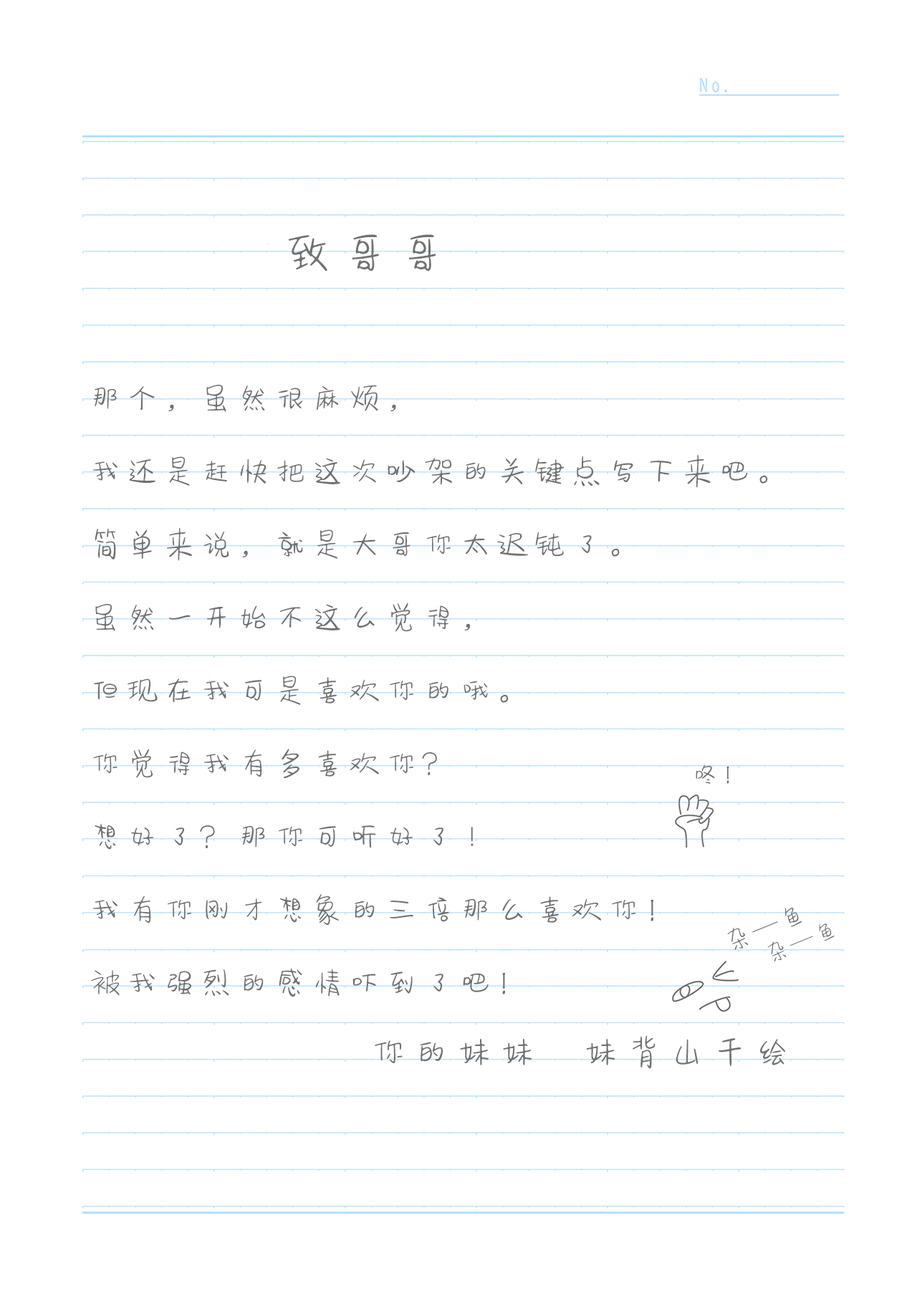
<style>
.page{position:relative;width:917px;height:1301px;background:#ffffff}
.page>*{position:absolute;margin:0}
.t1{font:52.3px "FZSEYBJW--GB1-0";letter-spacing:0.09em;color:#717171}
.t2{font:34px/73.1px "FZSEYBJW--GB1-0";letter-spacing:0.09em;color:#717171}
.t3{font:27.1px "FZSEYBJW--GB1-0";letter-spacing:0.09em;color:#717171}
.t4{font:24.2px "FZSEYBJW--GB1-0";letter-spacing:0.09em;color:#717171}
.t5{font:39.4px "FZSEYBJW--GB1-0";letter-spacing:0.09em;color:#717171}
</style>
<div class="page">
<p class="t1" style="left:289px;top:234px;width:147px;height:37px">致哥哥</p>
<p class="t2" style="left:91px;top:385px;width:677px;height:612px">那个，虽然很麻烦，<br>我还是赶快把这次吵架的关键点写下来吧。<br>简单来说，就是大哥你太迟钝了。<br>虽然一开始不这么觉得，<br>但现在我可是喜欢你的哦。<br>你觉得我有多喜欢你？<br>想好了？那你可听好了!<br>我有你刚才想象的三倍那么喜欢你！<br>被我强烈的感情吓到了吧！</p>
<p class="t3" style="left:695px;top:764px;width:34px;height:20px">咚！</p>
<p class="t3" style="left:727px;top:907px;width:75px;height:43px;rotate:-22deg">杂—鱼</p>
<p class="t4" style="left:767px;top:923px;width:67px;height:38px;rotate:-22deg">杂—鱼</p>
<p class="t5" style="left:375px;top:1035px;width:410px;height:34px">你的妹妹   妹背山千绘</p>
</div>
